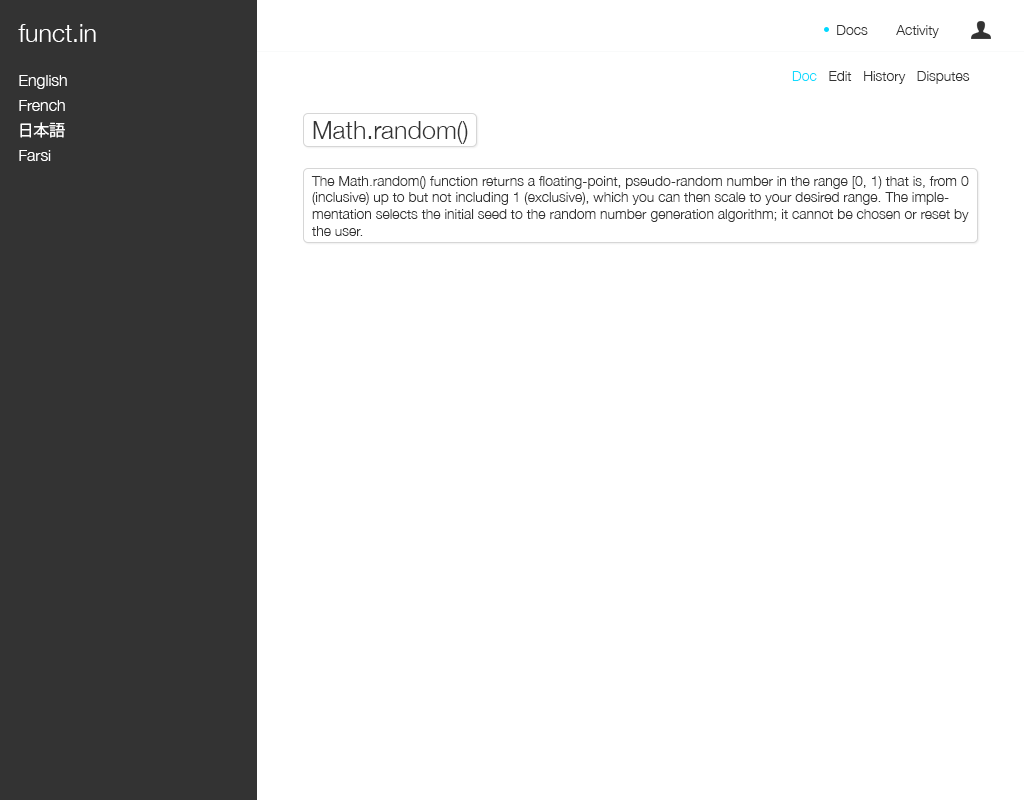
<style>
.page{position:relative;width:1024px;height:800px;background:#ffffff}
.page>*{position:absolute;margin:0}
.t1{font:25px "HelveticaNeue-Light";color:#ffffff}
.t2{font:14px "HelveticaNeue-Light";color:#333333}
.t3{font:16px/25px "HelveticaNeue-Light";color:#ffffff}
.t4{font:16px/25px "KozGoPr6N-Regular";color:#ffffff}
.t5{font:14px "HelveticaNeue-Light";color:#12dbff}
.t6{font:25px "HelveticaNeue-Light";color:#333333}
</style>
<div class="page">
<p class="t1" style="left:18px;top:24px;width:78px;height:18px">funct.in</p>
<p class="t2" style="left:837px;top:25px;width:31px;height:10px">Docs</p>
<p class="t2" style="left:896px;top:25px;width:43px;height:13px">Activity</p>
<p class="t3" style="left:19px;top:75px;width:48px;height:86px">English<br>French<br><span class="t4">日本語<br></span>Farsi</p>
<p class="t2" style="left:792px;top:71px;width:178px;height:13px"><span class="t5">Doc</span>   Edit   History   Disputes</p>
<p class="t2" style="left:311px;top:121px;width:658px;height:115px"><span class="t6">Math.random()<br><br></span>The Math.random() function returns a floating-point, pseudo-random number in the range [0, 1) that is, from 0 (inclusive) up to but not including 1 (exclusive), which you can then scale to your desired range. The implementation selects the initial seed to the random number generation algorithm; it cannot be chosen or reset by the user.</p>
</div>
